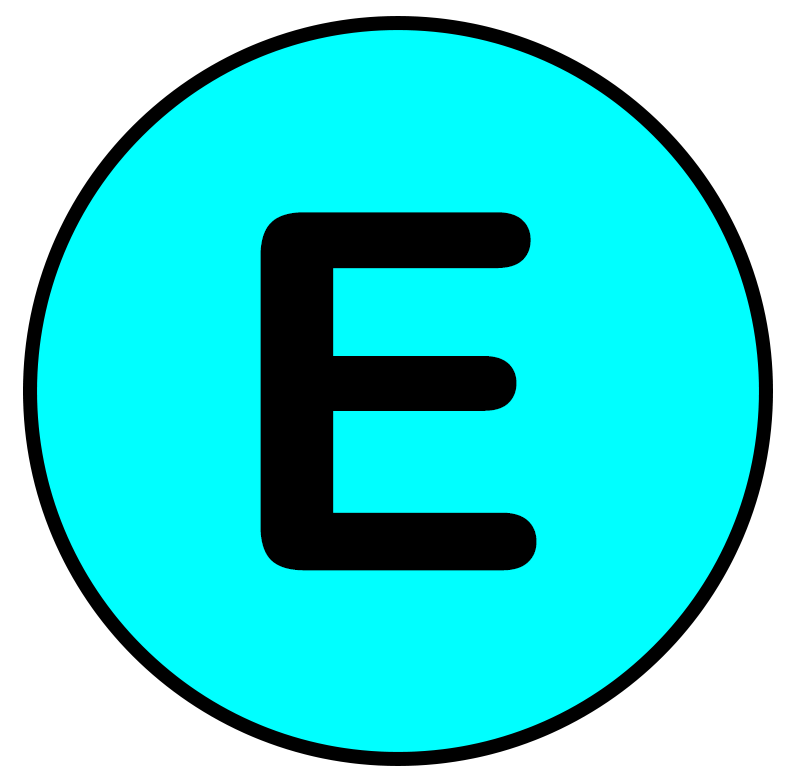
<style>
.page{position:relative;width:796px;height:781px;background:#00ffff}
.page>*{position:absolute;margin:0}
.t1{font:500px "ArialRoundedMTBold";color:#000000}
</style>
<div class="page">
<p class="t1" style="left:260px;top:212px;width:277px;height:359px">E</p>
</div>
